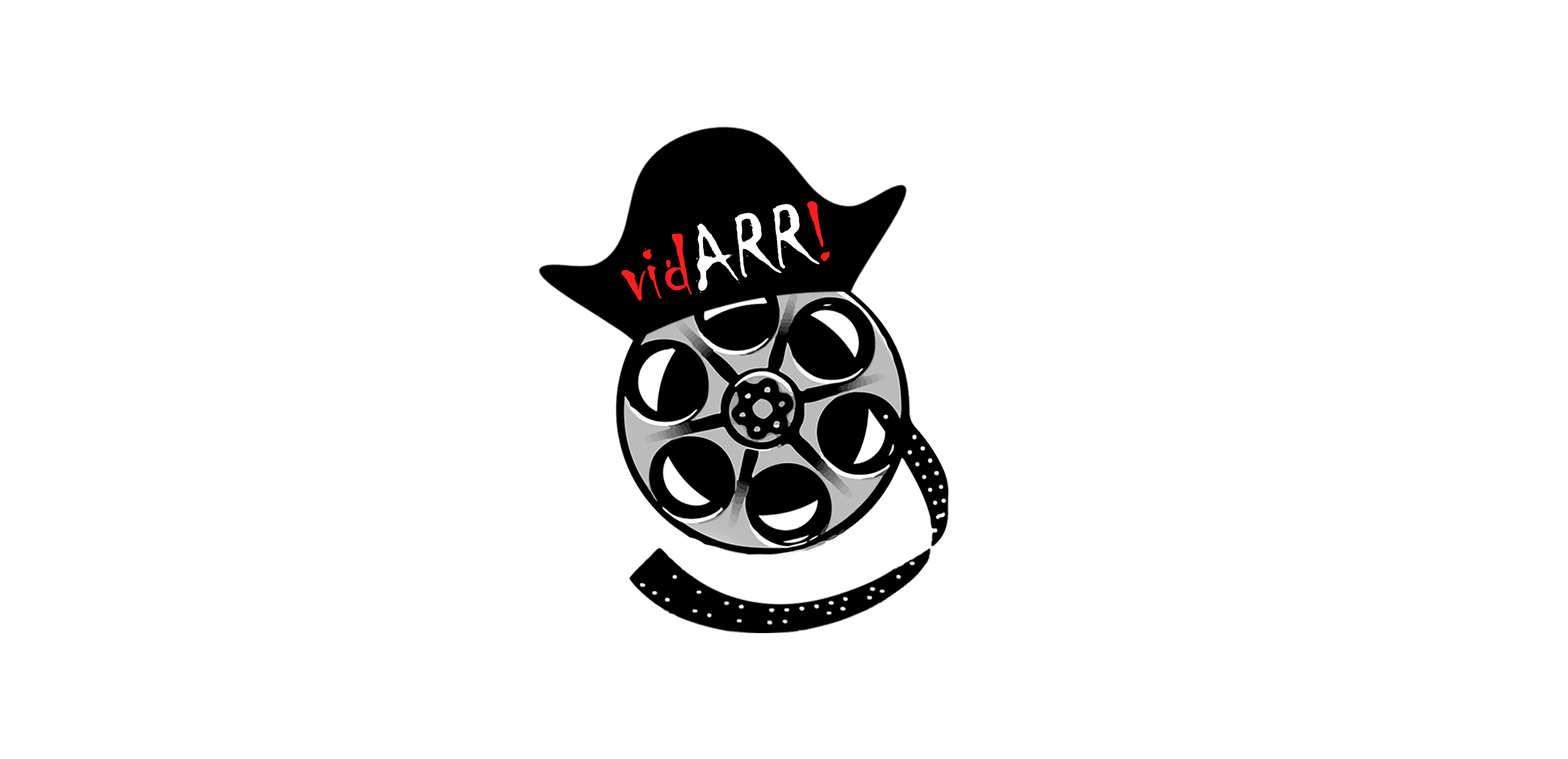
<style>
.page{position:relative;width:1568px;height:759px;background:#ffffff}
.page>*{position:absolute;margin:0}
.t1{font:89.8px "Chiller-Regular";color:#f91f1f}
.t2{font:89.8px "Chiller-Regular";color:#ffffff}
</style>
<div class="page">
<p class="t1" style="left:621px;top:201px;width:209px;height:100px;rotate:-13deg">vid<span class="t2">ARR</span>!</p>
</div>
